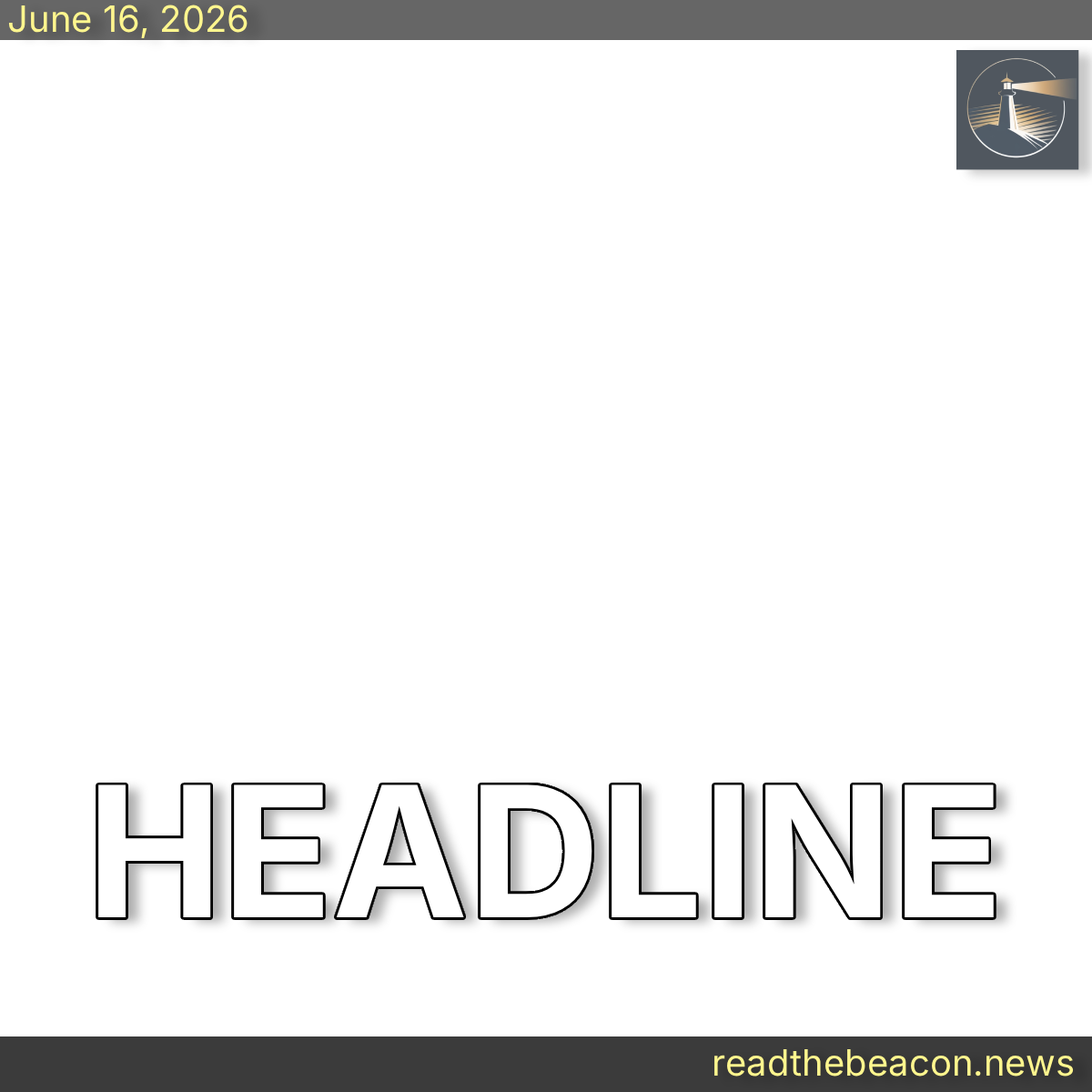
<style>
.page{position:relative;width:1092px;height:1092px;background:#ffffff}
.page>*{position:absolute;margin:0}
.t1{font:36.4px "Inter-Regular";color:#fff68e}
.t2{font:182px "Inter-Bold";color:#ffffff}
</style>
<div class="page">
<p class="t1" style="left:8px;top:5px;width:240px;height:34px">June 16, 2026</p>
<p class="t2" style="left:98px;top:784px;width:896px;height:133px">HEADLINE</p>
<p class="t1" style="left:714px;top:1048px;width:360px;height:29px">readthebeacon.news</p>
</div>
